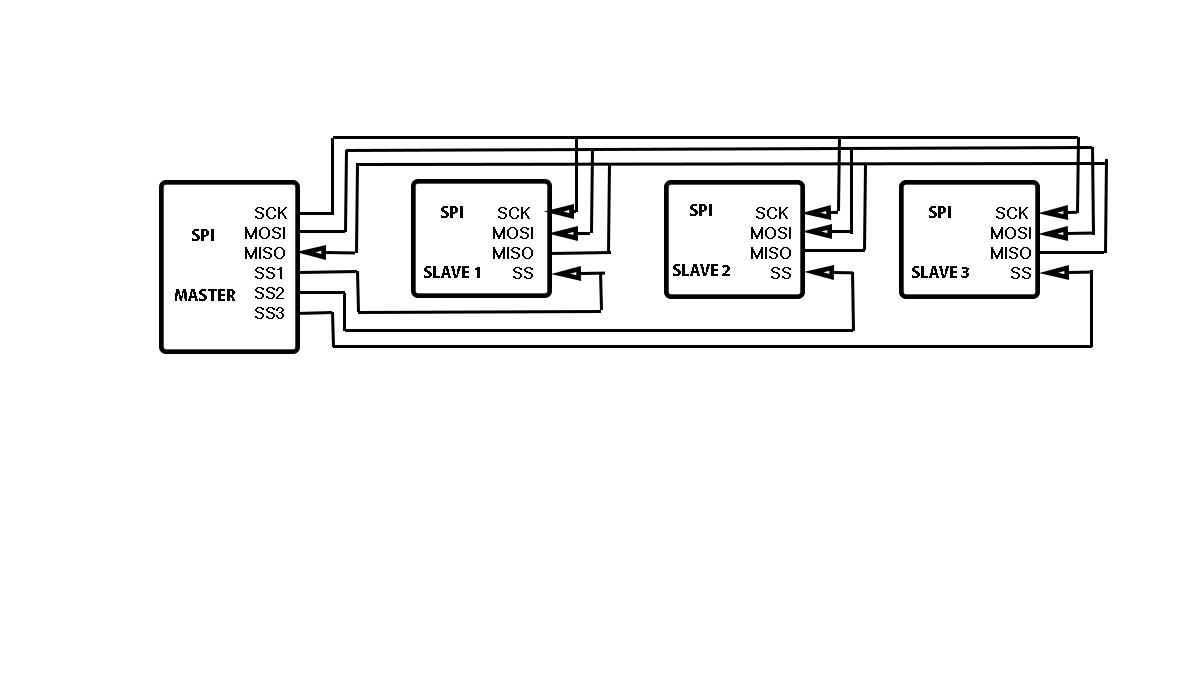
<style>
.page{position:relative;width:1200px;height:680px;background:#ffffff}
.page>*{position:absolute;margin:0}
.t1{font:16.7px "MicrosoftSansSerif";color:#000000}
.t2{font:16.7px "MyriadPro-Bold";color:#000000}
</style>
<div class="page">
<p class="t1" style="left:245px;top:207px;width:42px;height:112px">SCK<br>MOSI<br>MISO<br>  SS1<br>  SS2<br>  SS3</p>
<p class="t2" style="left:424px;top:206px;width:56px;height:72px">SPI<br><br><br>SLAVE 1</p>
<p class="t1" style="left:493px;top:207px;width:40px;height:72px">SCK<br>MOSI<br>MISO<br>    SS</p>
<p class="t2" style="left:673px;top:204px;width:57px;height:72px">SPI<br><br><br>SLAVE 2</p>
<p class="t1" style="left:751px;top:207px;width:40px;height:72px">SCK<br>MOSI<br>MISO<br>    SS</p>
<p class="t2" style="left:912px;top:206px;width:57px;height:72px">SPI<br><br><br>SLAVE 3</p>
<p class="t1" style="left:991px;top:207px;width:40px;height:72px">SCK<br>MOSI<br>MISO<br>    SS</p>
<p class="t2" style="left:175px;top:229px;width:60px;height:72px">SPI<br><br><br>MASTER</p>
</div>
